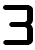
<style>
.page{position:relative;width:35px;height:50px;background:#ffffff}
.page>*{position:absolute;margin:0}
.t1{font:61.9px "OCRAExtended";color:#000000;scale:1.16 1}
</style>
<div class="page">
<p class="t1" style="left:3px;top:5px;width:30px;height:40px">3</p>
</div>
